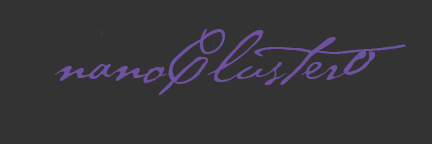
<style>
.page{position:relative;width:432px;height:144px;background:#333333}
.page>*{position:absolute;margin:0}
.t1{font:72px "P22CezanneRegular";color:#6e52a0}
</style>
<div class="page">
<p class="t1" style="left:54px;top:29px;width:352px;height:66px">nanoCluster0</p>
</div>
